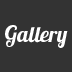
<style>
.page{position:relative;width:72px;height:72px;background:#333333}
.page>*{position:absolute;margin:0}
.t1{font:22px "Lobster1.4";color:#ffffff}
</style>
<div class="page">
<p class="t1" style="left:5px;top:25px;width:63px;height:23px">Gallery</p>
</div>
